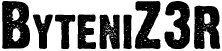
<style>
.page{position:relative;width:222px;height:51px;background:#ffffff}
.page>*{position:absolute;margin:0}
.t1{font:47.8px "DirtyHeadline";color:#000000}
.t2{font:60px "DirtyHeadline";color:#000000}
</style>
<div class="page">
<p class="t1" style="left:2px;top:1px;width:219px;height:48px"><span class="t2">B</span>yteni<span class="t2">Z3r</span></p>
</div>
